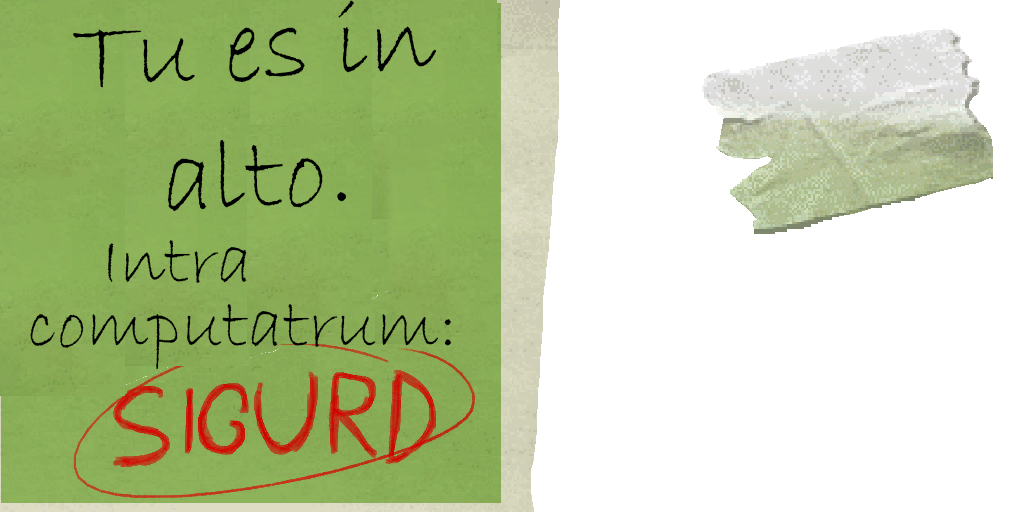
<style>
.page{position:relative;width:1024px;height:512px;background:#ffffff}
.page>*{position:absolute;margin:0}
.t1{font:107px "BradleyHandITC";color:#000000}
.t2{font:72.3px/64px "BradleyHandITC";color:#000000}
</style>
<div class="page">
<p class="t1" style="left:73px;top:0px;width:363px;height:212px;rotate:-3deg">Tu es in <br>     alto.</p>
<p class="t2" style="left:30px;top:240px;width:421px;height:129px">Intra <br> computatrum:</p>
</div>
